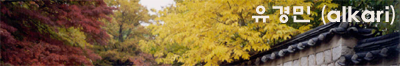
<style>
.page{position:relative;width:400px;height:66px}
.page>*{position:absolute;margin:0}
.t1{font:20px "ExpoB-HM";letter-spacing:0.025em;color:#f3ece6}
</style>
<div class="page">
<p class="t1" style="left:252px;top:5px;width:143px;height:20px">유경민 (alkari)</p>
</div>
